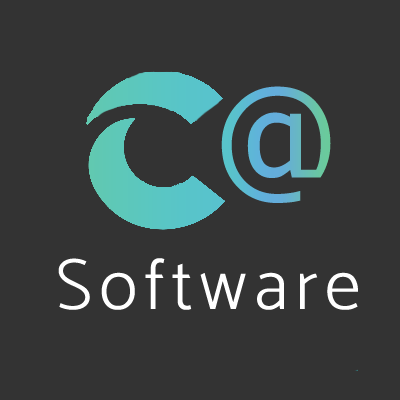
<style>
.page{position:relative;width:400px;height:400px;background:#333333}
.page>*{position:absolute;margin:0}
.t1{font:72px "Catamaran-Light";letter-spacing:0.1em;color:#ffffff}
</style>
<div class="page">
<p class="t1" style="left:58px;top:258px;width:300px;height:52px">Software</p>
</div>
